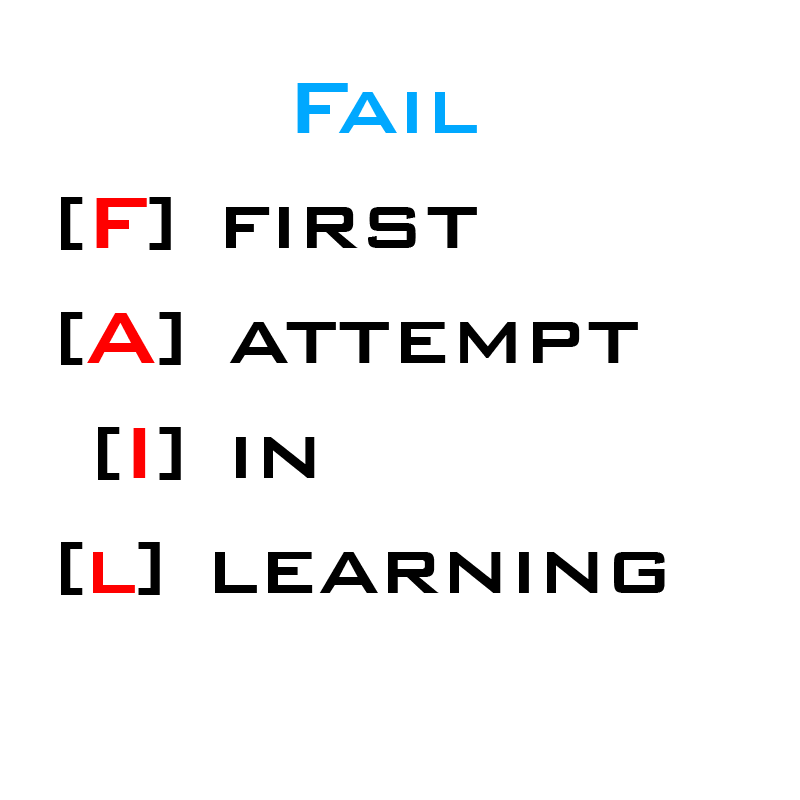
<style>
.page{position:relative;width:800px;height:800px;background:#ffffff}
.page>*{position:absolute;margin:0}
.t1{font:96px "BankGothicBT-Medium";color:#000000}
.t2{font:80px "BankGothicBT-Medium";color:#000000}
.t3{font:96px "BankGothicBT-Medium";color:#00a8ff}
.t4{font:96px "BankGothicBT-Medium";color:#ff0000}
</style>
<div class="page">
<p class="t1" style="left:61px;top:83px;width:604px;height:512px"><span class="t2">      </span><span class="t3"> Fail<br></span>[<span class="t4">F</span>] first<br>[<span class="t4">A</span>] attempt<br> [<span class="t4">I</span>] in<br>[<span class="t4">l</span>] learning</p>
</div>
